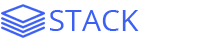
<style>
.page{position:relative;width:200px;height:40px;background:#ffffff}
.page>*{position:absolute;margin:0}
.t1{font:30px "OpenSans";letter-spacing:0.005em;color:#3d60f4}
</style>
<div class="page">
<p class="t1" style="left:50px;top:10px;width:89px;height:21px">STACK</p>
</div>
